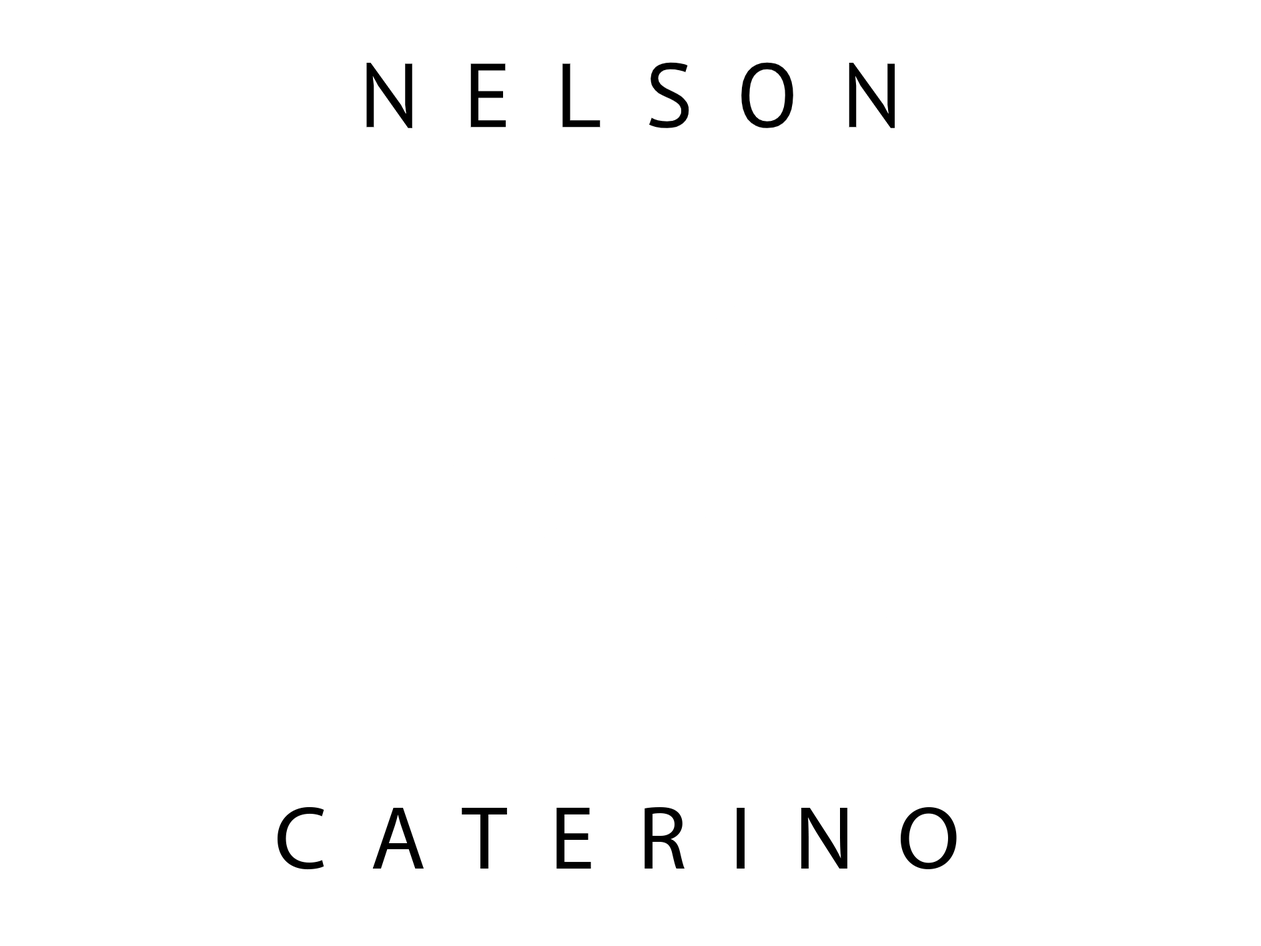
<style>
.page{position:relative;width:1261px;height:946px;background:#ffffff}
.page>*{position:absolute;margin:0}
.t1{font:90.4px "MyriadPro-Regular";letter-spacing:0.48em;color:#000000}
</style>
<div class="page">
<p class="t1" style="left:366px;top:62px;width:529px;height:66px">NELSON</p>
<p class="t1" style="left:278px;top:806px;width:679px;height:63px">CATERINO</p>
</div>
